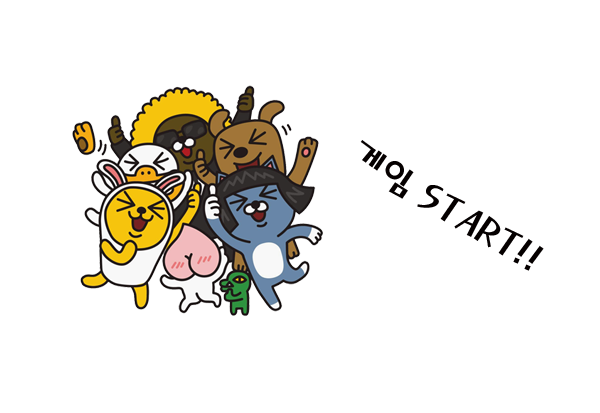
<style>
.page{position:relative;width:600px;height:413px;background:#ffffff}
.page>*{position:absolute;margin:0}
.t1{font:40px "MagicR-HM";color:#050000}
</style>
<div class="page">
<p class="t1" style="left:360px;top:140px;width:184px;height:131px;rotate:30deg">게임 START!!</p>
</div>
